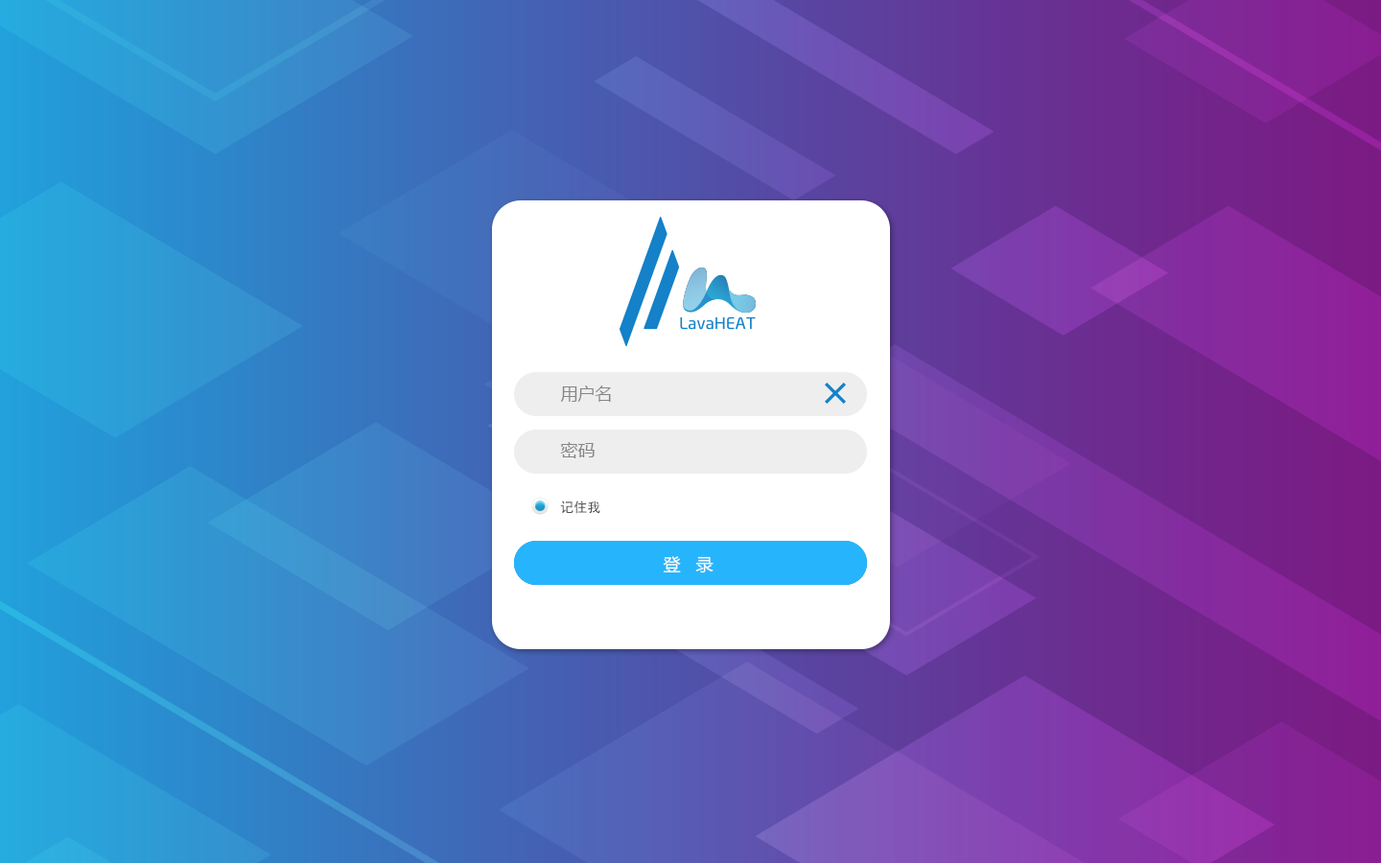
<style>
.page{position:relative;width:1381px;height:863px}
.page>*{position:absolute;margin:0}
.t1{font:17.3px "MicrosoftYaHei";color:#868686;text-transform:uppercase}
.t2{font:13.4px "AdobeHeitiStd-Regular";color:#515151}
.t3{font:17.3px "MicrosoftYaHei";color:#ffffff;text-transform:uppercase}
</style>
<div class="page">
<p class="t1" style="left:560px;top:386px;width:51px;height:16px">用户名</p>
<p class="t1" style="left:560px;top:442px;width:35px;height:17px">密码</p>
<p class="t2" style="left:560px;top:501px;width:40px;height:13px">记住我</p>
<p class="t3" style="left:663px;top:556px;width:51px;height:18px">登   录</p>
</div>
